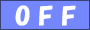
<style>
.page{position:relative;width:90px;height:30px;background:#7487ff}
.page>*{position:absolute;margin:0}
.t1{font:24px "HGPSoeiKakupoptai";color:#ffffff;font-weight:bold}
</style>
<div class="page">
<p class="t1" style="left:15px;top:5px;width:61px;height:21px">O F F</p>
</div>
